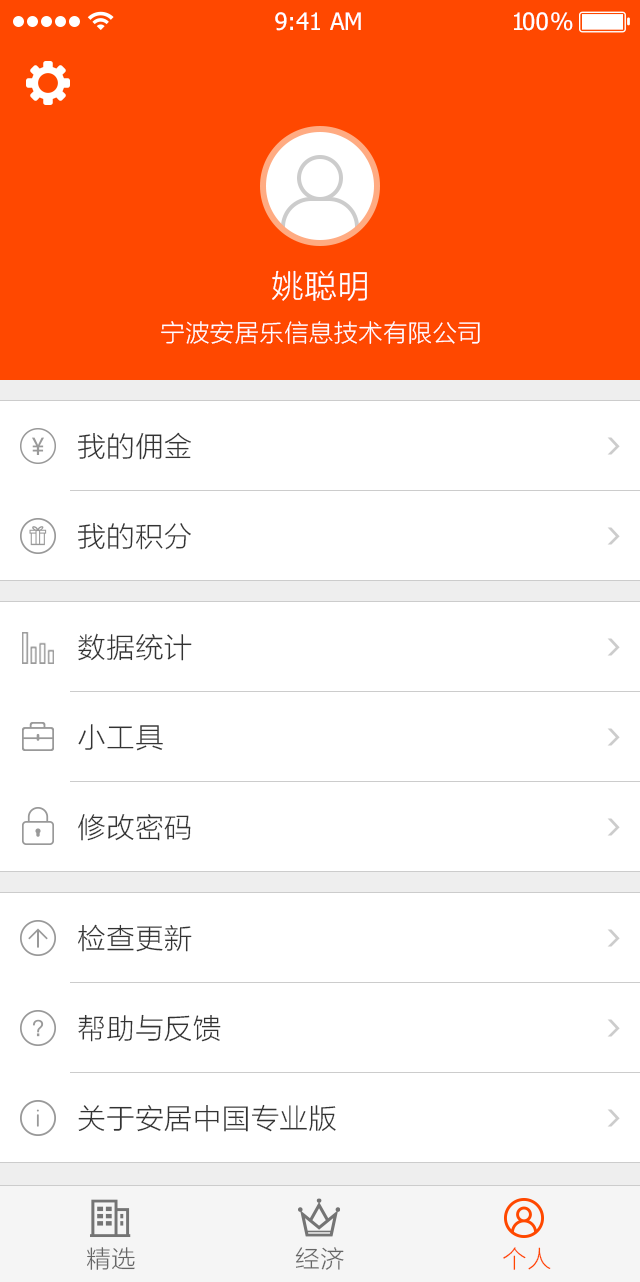
<style>
.page{position:relative;width:640px;height:1282px;background:#ffffff}
.page>*{position:absolute;margin:0}
.t1{font:24px "Tahoma";color:#ffffff}
.t2{font:24px "Tahoma";letter-spacing:-0.1em;color:#ffffff}
.t3{font:24px "Tahoma";letter-spacing:-0.25em;color:#ffffff}
.t4{font:32px "STHeitiSC-Light";color:#ffffff}
.t5{font:24px "STHeitiSC-Light";color:#ffffff}
.t6{font:28px "STHeitiSC-Light";color:#333333}
.t7{font:24px "STHeitiSC-Light";color:#666666}
.t8{font:24px "STHeitiSC-Light";color:#ff4800}
</style>
<div class="page">
<p class="t1" style="left:275px;top:12px;width:86px;height:19px">9:41 AM</p>
<p class="t2" style="left:514px;top:12px;width:59px;height:19px">1<span class="t1">0</span><span class="t3">0 </span>%</p>
<p class="t4" style="left:272px;top:270px;width:95px;height:31px">姚聪明</p>
<p class="t5" style="left:161px;top:321px;width:319px;height:23px">宁波安居乐信息技术有限公司</p>
<p class="t6" style="left:78px;top:432px;width:113px;height:28px">我的佣金</p>
<p class="t6" style="left:78px;top:523px;width:113px;height:27px">我的积分</p>
<p class="t6" style="left:78px;top:633px;width:114px;height:28px">数据统计</p>
<p class="t6" style="left:78px;top:724px;width:85px;height:27px">小工具</p>
<p class="t6" style="left:78px;top:814px;width:113px;height:27px">修改密码</p>
<p class="t6" style="left:78px;top:924px;width:114px;height:28px">检查更新</p>
<p class="t6" style="left:78px;top:1014px;width:143px;height:28px">帮助与反馈</p>
<p class="t6" style="left:78px;top:1104px;width:258px;height:28px">关于安居中国专业版</p>
<p class="t7" style="left:87px;top:1247px;width:48px;height:23px">精选</p>
<p class="t7" style="left:295px;top:1247px;width:49px;height:23px">经济</p>
<p class="t8" style="left:503px;top:1247px;width:48px;height:23px">个人</p>
</div>
